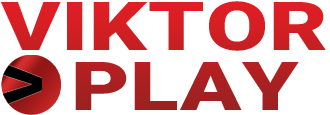
<style>
.page{position:relative;width:330px;height:115px;background:#ffffff}
.page>*{position:absolute;margin:0}
.t1{font:67.5px/60px "Roboto-Black";letter-spacing:0.01em;scale:1.33 1}
</style>
<div class="page">
<p class="t1" style="left:1px;top:1px;width:325px;height:109px">VIKTOR  <br>   PLAY</p>
</div>
